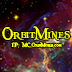
<style>
.page{position:relative;width:72px;height:72px}
.page>*{position:absolute;margin:0}
.t1{font:17.5px "PiecesofEight";color:#f6ff00}
.t2{font:6px "PiecesofEight";color:#f6ff00}
</style>
<div class="page">
<p class="t1" style="left:2px;top:26px;width:68px;height:15px">OrbitMines</p>
<p class="t2" style="left:11px;top:42px;width:51px;height:6px">IP: MC.OrbiMines.com</p>
</div>
